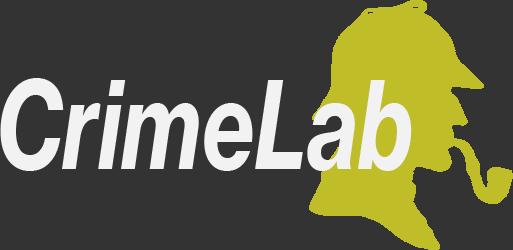
<style>
.page{position:relative;width:513px;height:250px;background:#333333}
.page>*{position:absolute;margin:0}
.t1{font:120px "NeueHaasGroteskTextPro-BoldItalic";color:#f2f2f2;scale:0.75 1}
</style>
<div class="page">
<p class="t1" style="left:0px;top:78px;width:412px;height:93px">CrimeLab</p>
</div>
